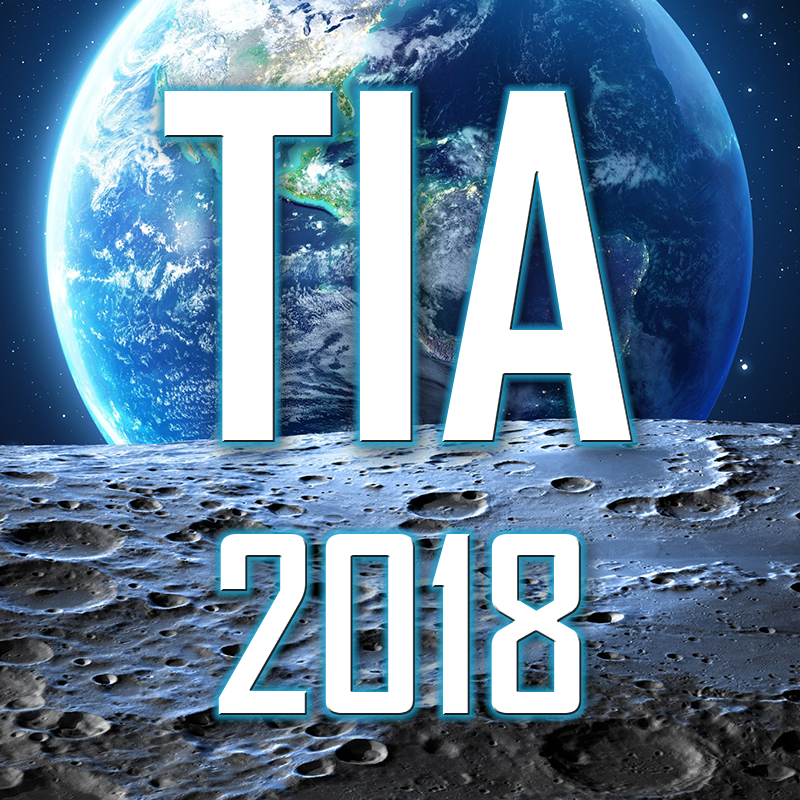
<style>
.page{position:relative;width:800px;height:800px}
.page>*{position:absolute;margin:0}
.t1{font:458.7px "AgencyFB-Bold";color:#ffffff}
.t2{font:236.9px "AgencyFB-Bold";color:#ffffff}
</style>
<div class="page">
<p class="t1" style="left:164px;top:91px;width:469px;height:351px">TIA</p>
<p class="t2" style="left:218px;top:534px;width:364px;height:181px">2018</p>
</div>
